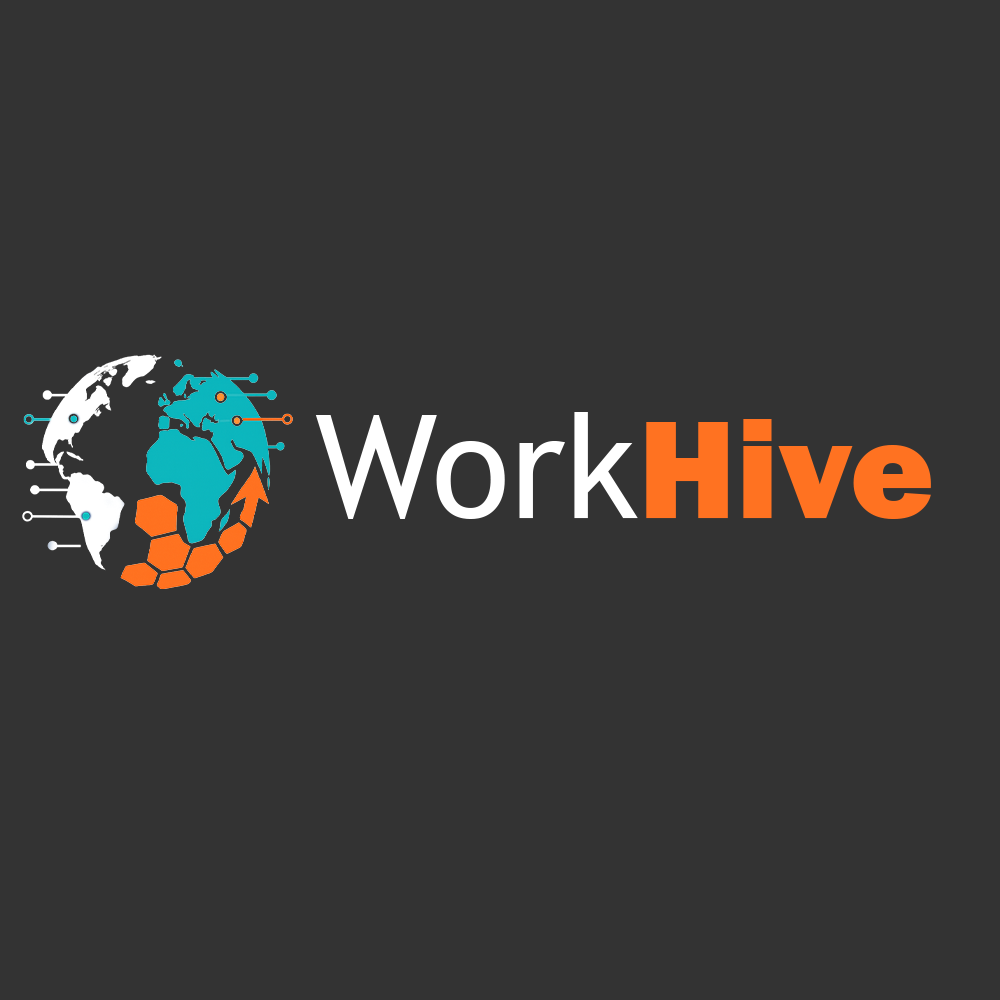
<style>
.page{position:relative;width:1000px;height:1000px;background:#333333}
.page>*{position:absolute;margin:0}
.t1{font:144.3px "TrebuchetMS";color:#ffffff}
.t2{font:144.3px "FranklinGothic-Heavy";color:#ff7221}
</style>
<div class="page">
<p class="t1" style="left:315px;top:412px;width:616px;height:107px">Work<span class="t2">Hive</span></p>
</div>
